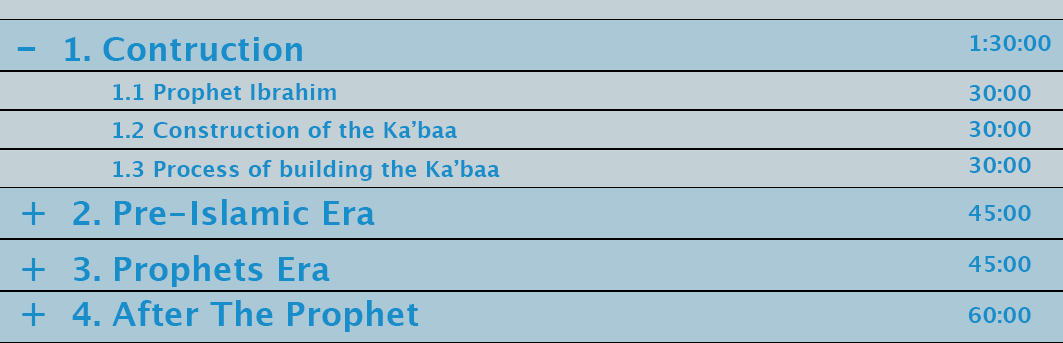
<style>
.page{position:relative;width:1063px;height:343px;background:#aac8d5}
.page>*{position:absolute;margin:0}
.t1{font:33.3px "LucidaGrande-Bold";color:#178dca}
.t2{font:38.9px "LucidaGrande-Bold";color:#178dca}
.t3{font:22.2px "LucidaGrande-Bold";color:#178dca}
</style>
<div class="page">
<p class="t1" style="left:17px;top:36px;width:285px;height:25px"><span class="t2">-</span>  1. Contruction</p>
<p class="t3" style="left:970px;top:35px;width:81px;height:16px">1:30:00</p>
<p class="t3" style="left:113px;top:83px;width:223px;height:21px">1.1 Prophet Ibrahim</p>
<p class="t3" style="left:969px;top:85px;width:62px;height:16px">30:00</p>
<p class="t3" style="left:113px;top:121px;width:344px;height:17px">1.2 Construction of the Ka’baa</p>
<p class="t3" style="left:969px;top:121px;width:62px;height:16px">30:00</p>
<p class="t3" style="left:113px;top:160px;width:387px;height:21px">1.3 Process of building the Ka’baa</p>
<p class="t3" style="left:969px;top:157px;width:62px;height:16px">30:00</p>
<p class="t1" style="left:22px;top:199px;width:353px;height:26px"><span class="t2">+</span>  2. Pre-Islamic Era</p>
<p class="t3" style="left:968px;top:205px;width:63px;height:16px">45:00</p>
<p class="t1" style="left:22px;top:255px;width:308px;height:32px"><span class="t2">+</span>  3. Prophets Era</p>
<p class="t3" style="left:968px;top:256px;width:63px;height:16px">45:00</p>
<p class="t1" style="left:22px;top:300px;width:397px;height:32px"><span class="t2">+</span>  4. After The Prophet</p>
<p class="t3" style="left:968px;top:307px;width:63px;height:16px">60:00</p>
</div>
